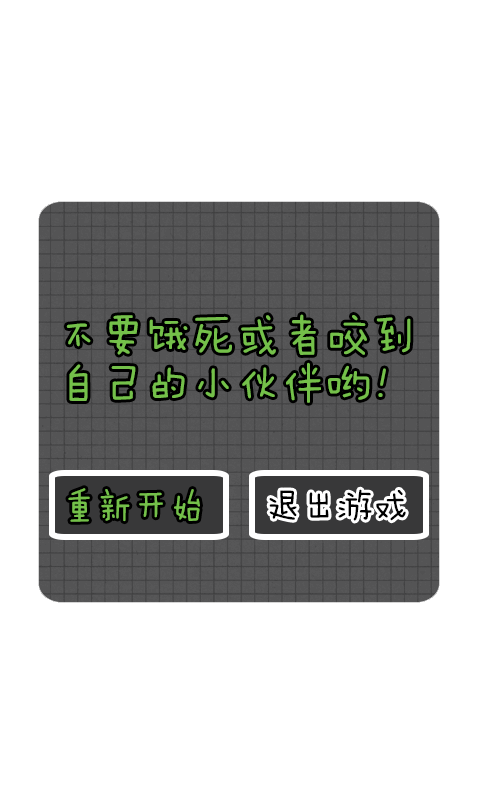
<style>
.page{position:relative;width:480px;height:800px;background:#ffffff}
.page>*{position:absolute;margin:0}
.t1{font:45px/48px "FZMWJW--GB1-0";color:#74c04a}
.t2{font:36px "FZMWJW--GB1-0";color:#74c04a}
.t3{font:36px "FZMWJW--GB1-0";color:#000000}
</style>
<div class="page">
<p class="t1" style="left:66px;top:314px;width:345px;height:89px">不要饿死或者咬到<br>自己的小伙伴哟！</p>
<p class="t2" style="left:68px;top:488px;width:132px;height:34px">重新开始</p>
<p class="t3" style="left:269px;top:489px;width:137px;height:32px">退出游戏</p>
</div>
